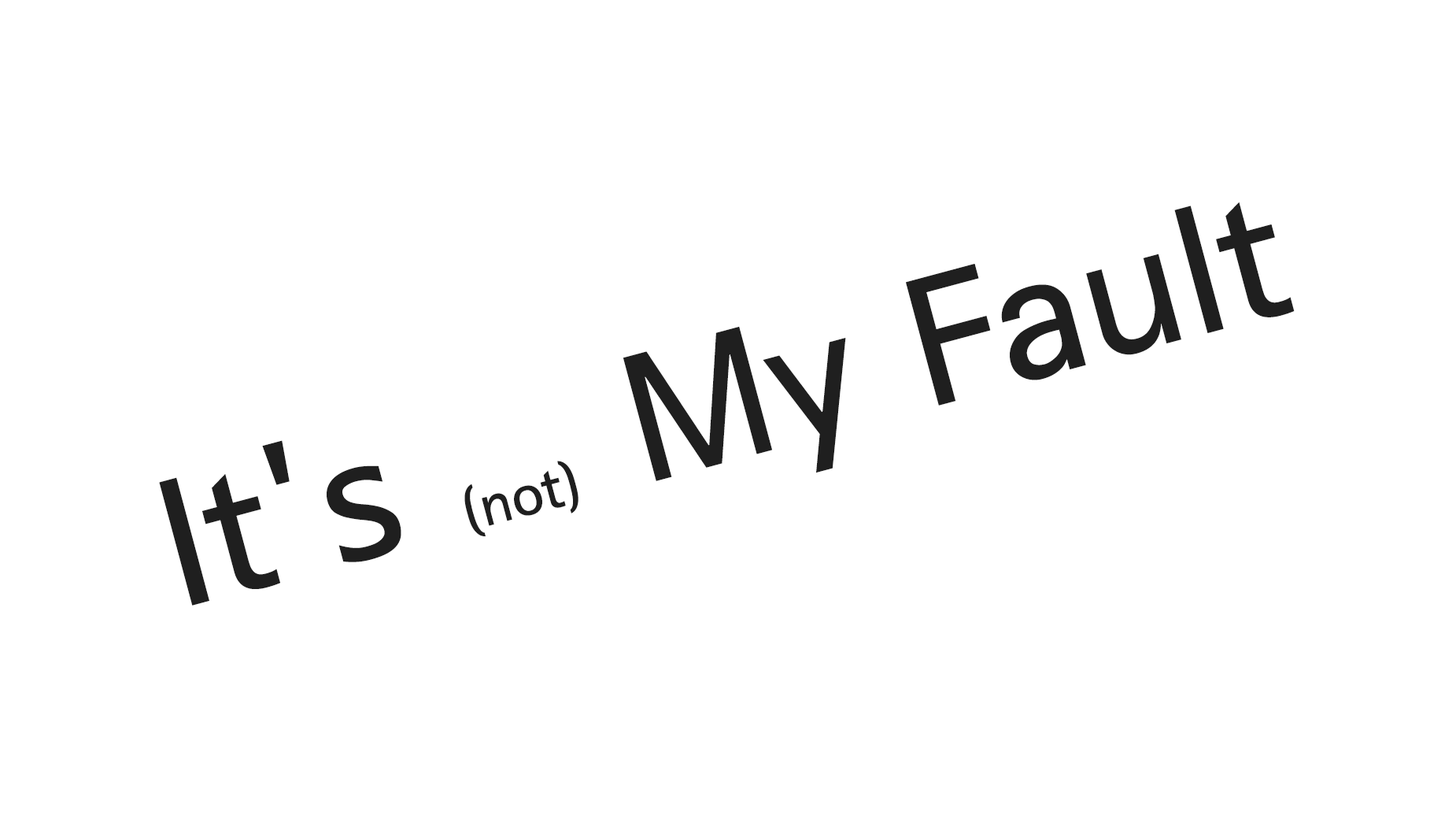
<style>
.page{position:relative;width:1456px;height:819px;background:#ffffff}
.page>*{position:absolute;margin:0}
.t1{font:177.1px "SeoulNamsanB";color:#1f1f1f}
.t2{font:56.7px "SeoulNamsanB";color:#1f1f1f}
</style>
<div class="page">
<p class="t1" style="left:159px;top:202px;width:1136px;height:403px;rotate:-15deg">It's <span class="t2">(not)</span> My Fault</p>
</div>
